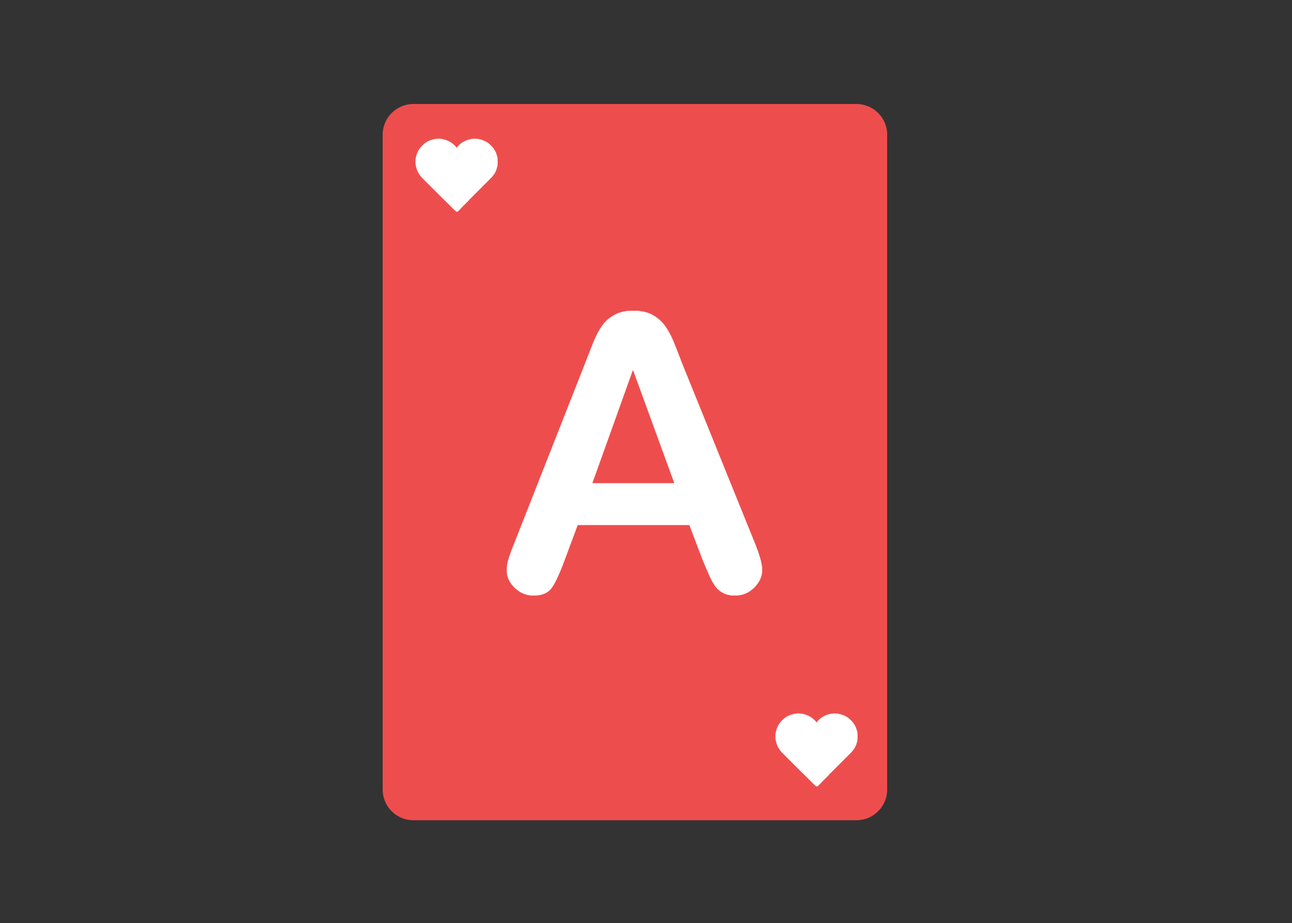
<style>
.page{position:relative;width:1292px;height:923px;background:#333333}
.page>*{position:absolute;margin:0}
.t1{font:384.5px "ArialRoundedMTBold";color:#ffffff}
</style>
<div class="page">
<p class="t1" style="left:506px;top:311px;width:256px;height:285px">A</p>
</div>
